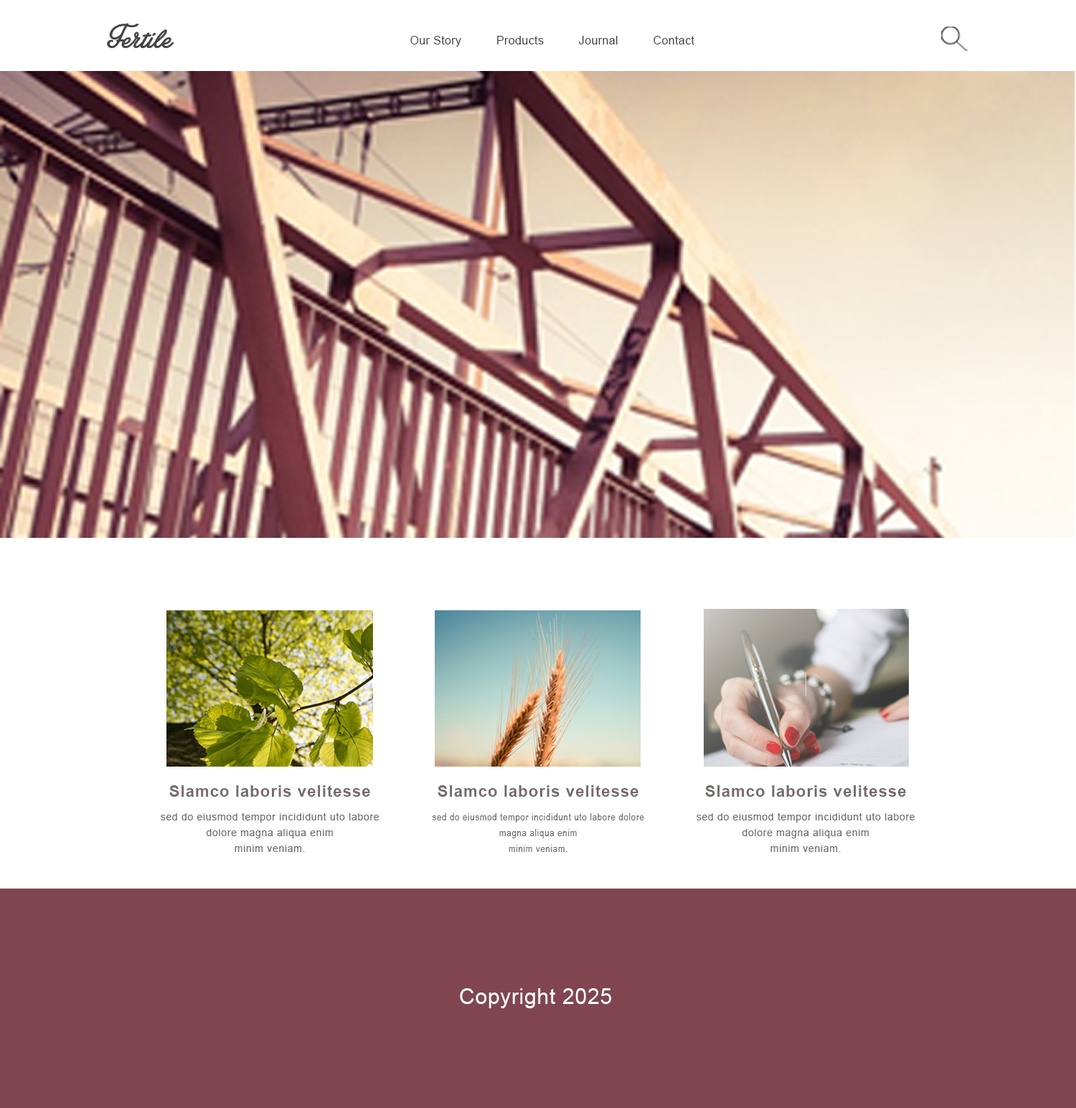
<style>
.page{position:relative;width:1076px;height:1108px;background:#ffffff}
.page>*{position:absolute;margin:0}
.t1{font:11.5px "ArialMT";letter-spacing:0.025em;color:#454545}
.t2{font:15.8px "Arial-BoldMT";letter-spacing:0.05em;color:#756a6a}
.t3{font:10px/15.8px "ArialMT";letter-spacing:0.05em;color:#756a6a}
.t4{font:10px/15.8px "ArialNarrow";letter-spacing:0.05em;color:#756a6a}
.t5{font:21.5px "ArialMT";letter-spacing:0.025em;color:#fefefe}
</style>
<div class="page">
<p class="t1" style="left:410px;top:36px;width:284px;height:11px">Our Story          Products          Journal          Contact</p>
<p class="t2" style="left:169px;top:785px;width:201px;height:12px">Slamco laboris velitesse</p>
<p class="t2" style="left:438px;top:785px;width:200px;height:12px">Slamco laboris velitesse</p>
<p class="t2" style="left:705px;top:785px;width:201px;height:12px">Slamco laboris velitesse</p>
<p class="t3" style="left:161px;top:813px;width:218px;height:39px;text-align:center">sed do eiusmod tempor incididunt uto labore dolore magna aliqua enim<br>minim veniam.</p>
<p class="t4" style="left:432px;top:813px;width:212px;height:39px;text-align:center">sed do eiusmod tempor incididunt uto labore dolore magna aliqua enim<br>minim veniam.</p>
<p class="t3" style="left:697px;top:813px;width:218px;height:39px;text-align:center">sed do eiusmod tempor incididunt uto labore dolore magna aliqua enim<br>minim veniam.</p>
<p class="t5" style="left:460px;top:988px;width:151px;height:21px">Copyright 2025</p>
</div>
